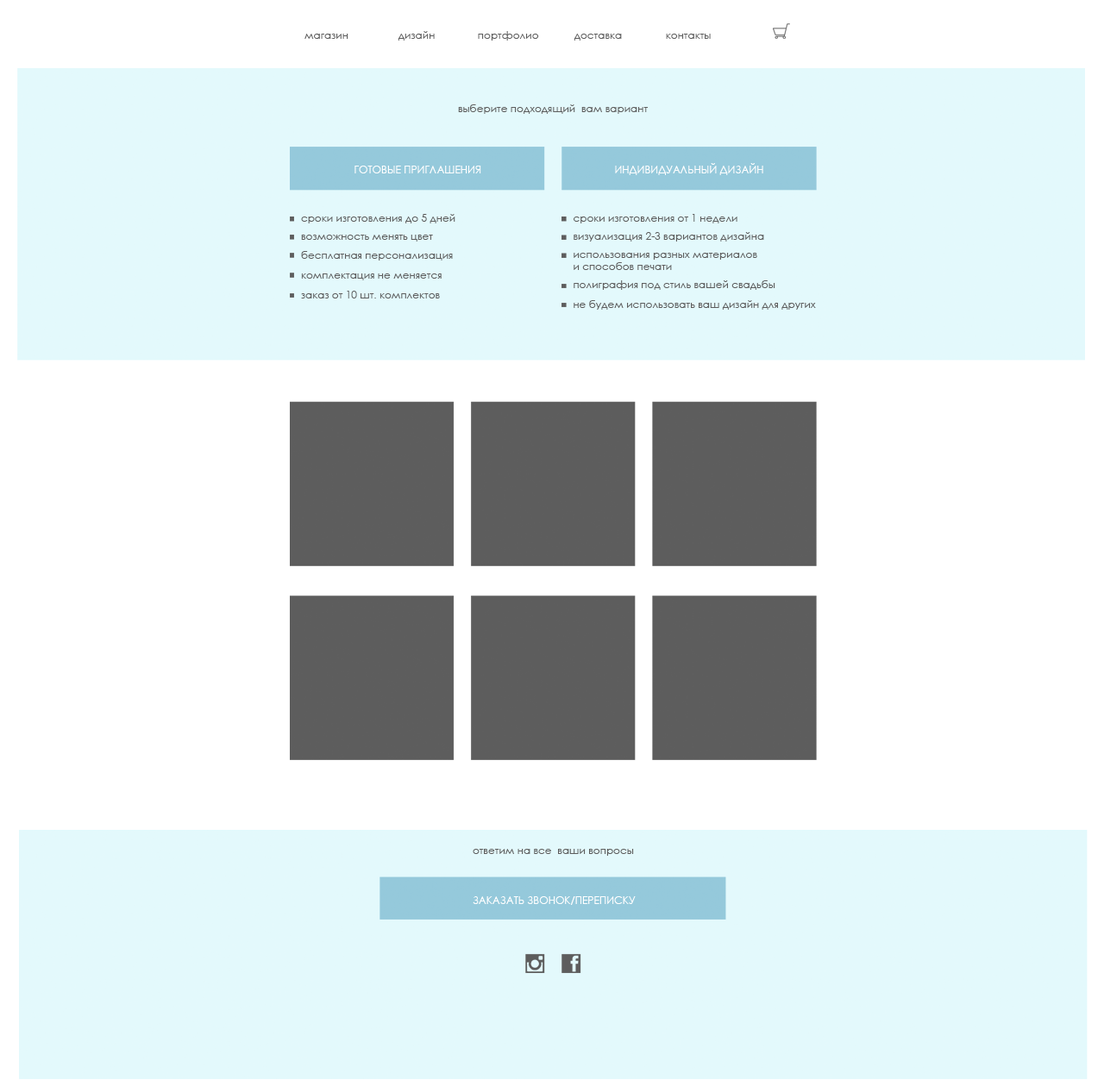
<style>
.page{position:relative;width:1104px;height:1080px;background:#e3f9fc}
.page>*{position:absolute;margin:0}
.t1{font:10.4px "CenturyGothic";color:#5d5d5d}
.t2{font:10.4px "CenturyGothic";color:#ffffff}
</style>
<div class="page">
<p class="t1" style="left:304px;top:34px;width:44px;height:5px">магазин</p>
<p class="t1" style="left:398px;top:31px;width:37px;height:10px">дизайн</p>
<p class="t1" style="left:478px;top:31px;width:61px;height:10px">портфолио</p>
<p class="t1" style="left:574px;top:34px;width:48px;height:7px">доставка</p>
<p class="t1" style="left:666px;top:34px;width:45px;height:5px">контакты</p>
<p class="t1" style="left:458px;top:104px;width:190px;height:10px">выберите подходящий  вам вариант</p>
<p class="t2" style="left:355px;top:166px;width:126px;height:7px">ГОТОВЫЕ ПРИГЛАШЕНИЯ</p>
<p class="t2" style="left:615px;top:163px;width:148px;height:12px">ИНДИВИДУАЛЬНЫЙ ДИЗАЙН</p>
<p class="t1" style="left:301px;top:214px;width:154px;height:9px">сроки изготовления до 5 дней</p>
<p class="t1" style="left:574px;top:214px;width:164px;height:9px">сроки изготовления от 1 недели</p>
<p class="t1" style="left:574px;top:232px;width:190px;height:10px">визуализация 2-3 вариантов дизайна</p>
<p class="t1" style="left:301px;top:235px;width:132px;height:7px">возможность менять цвет</p>
<p class="t1" style="left:301px;top:251px;width:152px;height:10px">бесплатная персонализация</p>
<p class="t1" style="left:574px;top:253px;width:183px;height:17px">использования разных материалов<br>и способов печати</p>
<p class="t1" style="left:301px;top:273px;width:141px;height:7px">комплектация не меняется</p>
<p class="t1" style="left:574px;top:280px;width:201px;height:10px">полиграфия под стиль вашей свадьбы</p>
<p class="t1" style="left:301px;top:291px;width:139px;height:7px">заказ от 10 шт. комплектов</p>
<p class="t1" style="left:574px;top:300px;width:242px;height:10px">не будем использовать ваш дизайн для других</p>
<p class="t1" style="left:473px;top:849px;width:161px;height:7px">ответим на все  ваши вопросы</p>
<p class="t2" style="left:473px;top:896px;width:163px;height:9px">ЗАКАЗАТЬ ЗВОНОК/ПЕРЕПИСКУ</p>
</div>
